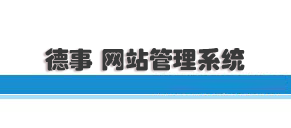
<style>
.page{position:relative;width:291px;height:128px;background:#ffffff}
.page>*{position:absolute;margin:0}
.t1{font:24px "FZHPJW--GB1-0";color:#383939;text-transform:uppercase}
</style>
<div class="page">
<p class="t1" style="left:45px;top:48px;width:200px;height:23px">德事蕯网站管理系统</p>
</div>
